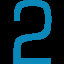
<style>
.page{position:relative;width:64px;height:64px;background:#000000}
.page>*{position:absolute;margin:0}
.t1{font:88px "MKSansTallX";color:#0a88ba}
</style>
<div class="page">
<p class="t1" style="left:13px;top:0px;width:39px;height:64px">2</p>
</div>
